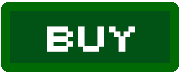
<style>
.page{position:relative;width:180px;height:76px;background:#005315}
.page>*{position:absolute;margin:0}
.t1{font:50px "PIXY";color:#ffffff;font-weight:bold}
</style>
<div class="page">
<p class="t1" style="left:47px;top:26px;width:88px;height:26px">buy</p>
</div>
